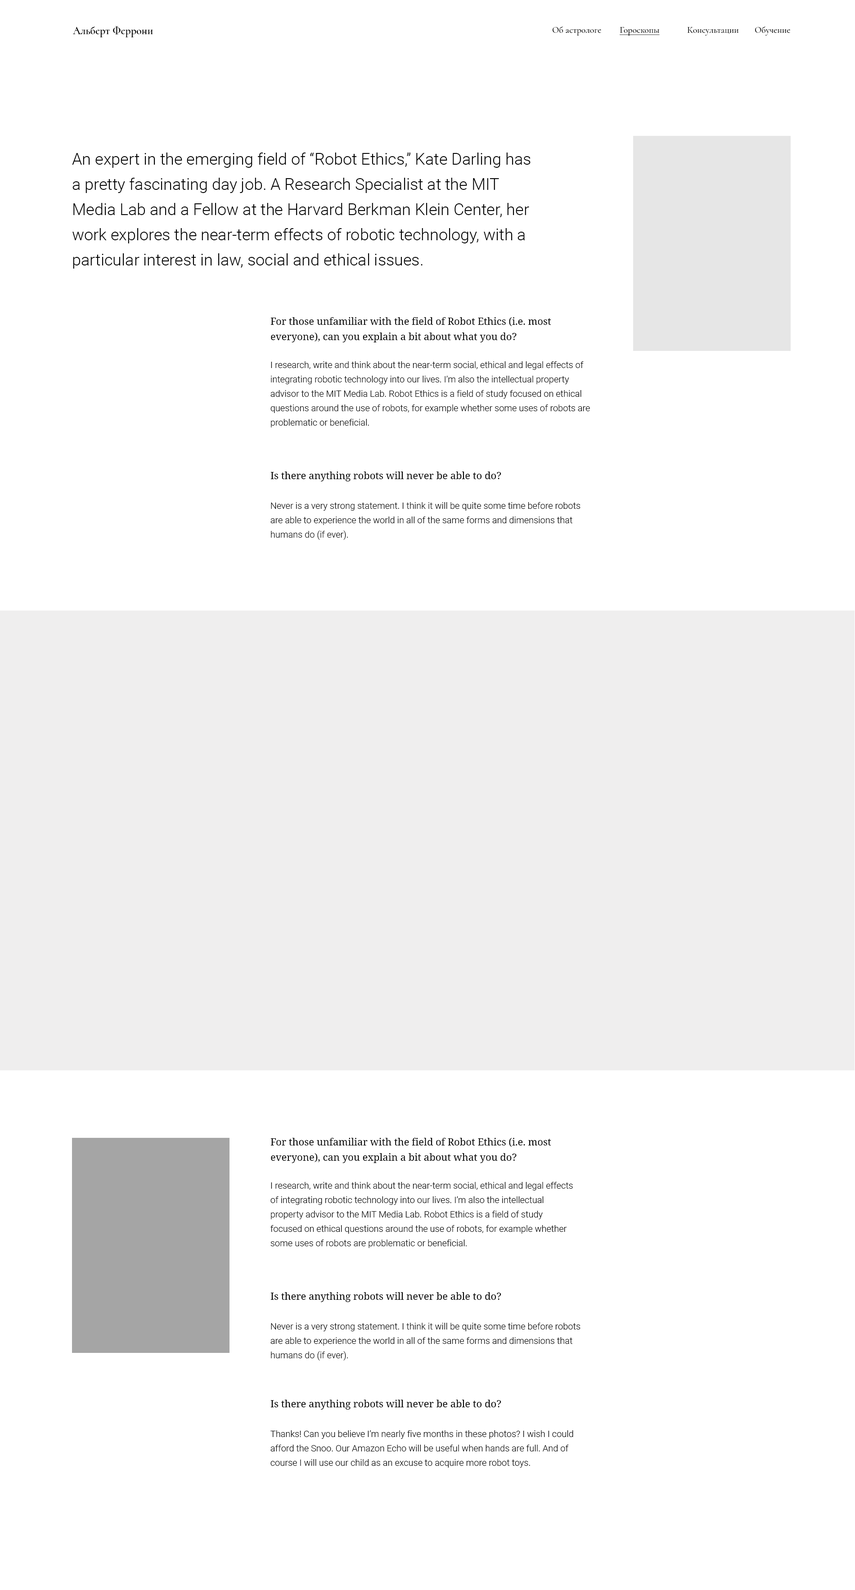
<style>
.page{position:relative;width:855px;height:1590px;background:#ffffff}
.page>*{position:absolute;margin:0}
.t1{font:10.8px "Cormorant-SemiBold";color:#000000}
.t2{font:9px "Cormorant-Medium";color:#000000}
.t3{font:9px "Cormorant-Medium";color:#000000;text-decoration:underline}
.t4{font:16.2px/25.2px "Roboto-Light";color:#000000}
.t5{font:9.9px/15.3px "NotoSerif";color:#000000}
.t6{font:9px/14.4px "Roboto-Light";color:#000000}
.t7{font:9.9px "NotoSerif";color:#000000}
</style>
<div class="page">
<p class="t1" style="left:72px;top:26px;width:81px;height:11px">Альберт Феррони</p>
<p class="t2" style="left:552px;top:26px;width:49px;height:10px">Об астрологе</p>
<p class="t3" style="left:620px;top:27px;width:40px;height:9px">Гороскопы</p>
<p class="t2" style="left:687px;top:27px;width:52px;height:9px">Консультации</p>
<p class="t2" style="left:755px;top:26px;width:35px;height:10px">Обучение</p>
<p class="t4" style="left:72px;top:153px;width:459px;height:116px">An expert in the emerging field of “Robot Ethics,” Kate Darling has a pretty fascinating day job. A Research Specialist at the MIT Media Lab and a Fellow at the Harvard Berkman Klein Center, her work explores the near-term effects of robotic technology, with a particular interest in law, social and ethical issues.</p>
<p class="t5" style="left:270px;top:317px;width:281px;height:25px">For those unfamiliar with the field of Robot Ethics (i.e. most everyone), can you explain a bit about what you do?</p>
<p class="t6" style="left:270px;top:361px;width:320px;height:67px">I research, write and think about the near-term social, ethical and legal effects of integrating robotic technology into our lives. I’m also the intellectual property advisor to the MIT Media Lab. Robot Ethics is a field of study focused on ethical questions around the use of robots, for example whether some uses of robots are problematic or beneficial.</p>
<p class="t7" style="left:270px;top:472px;width:231px;height:10px">Is there anything robots will never be able to do?</p>
<p class="t6" style="left:270px;top:502px;width:310px;height:38px">Never is a very strong statement. I think it will be quite some time before robots are able to experience the world in all of the same forms and dimensions that humans do (if ever).</p>
<p class="t5" style="left:270px;top:1138px;width:281px;height:25px">For those unfamiliar with the field of Robot Ethics (i.e. most everyone), can you explain a bit about what you do?</p>
<p class="t6" style="left:270px;top:1182px;width:303px;height:66px">I research, write and think about the near-term social, ethical and legal effects of integrating robotic technology into our lives. I’m also the intellectual property advisor to the MIT Media Lab. Robot Ethics is a field of study focused on ethical questions around the use of robots, for example whether some uses of robots are problematic or beneficial.</p>
<p class="t7" style="left:270px;top:1292px;width:231px;height:10px">Is there anything robots will never be able to do?</p>
<p class="t6" style="left:270px;top:1323px;width:310px;height:38px">Never is a very strong statement. I think it will be quite some time before robots are able to experience the world in all of the same forms and dimensions that humans do (if ever).</p>
<p class="t7" style="left:270px;top:1400px;width:231px;height:10px">Is there anything robots will never be able to do?</p>
<p class="t6" style="left:270px;top:1431px;width:303px;height:37px">Thanks! Can you believe I’m nearly five months in these photos? I wish I could afford the Snoo. Our Amazon Echo will be useful when hands are full. And of course I will use our child as an excuse to acquire more robot toys.</p>
</div>
